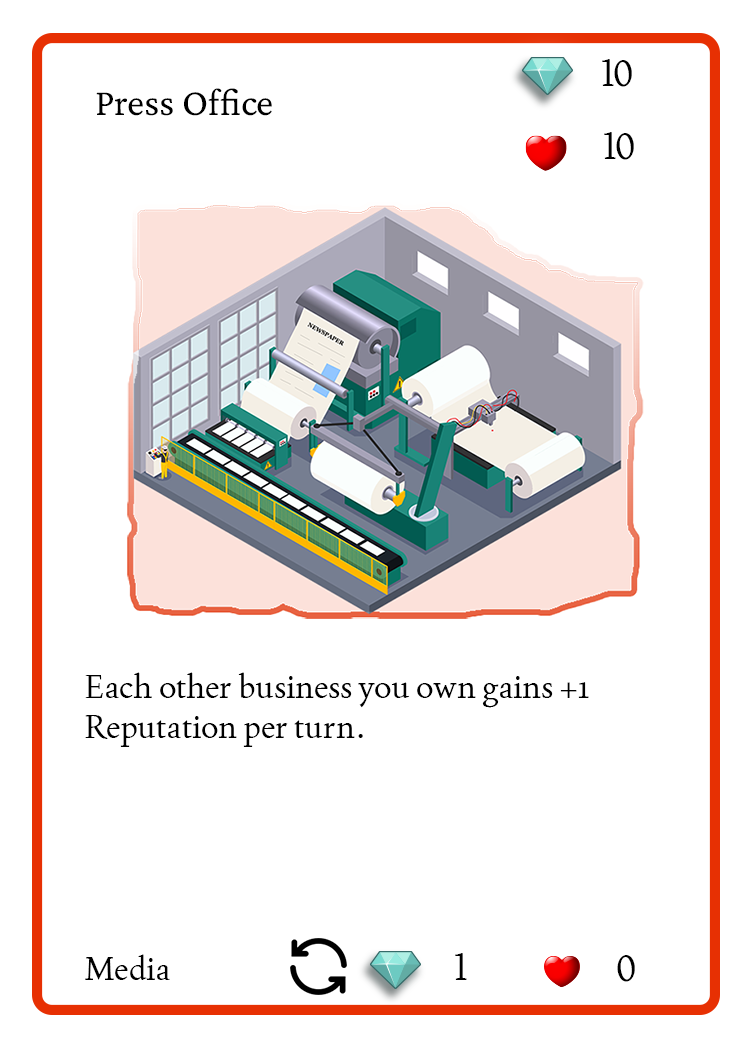
<style>
.page{position:relative;width:750px;height:1050px;background:#ffffff}
.page>*{position:absolute;margin:0}
.t1{font:37.5px "Joan-Regular";color:#000000;text-transform:uppercase}
.t2{font:38.9px "CrimsonPro-Regular";color:#000000}
.t3{font:33.3px "Joan-Regular";color:#000000}
</style>
<div class="page">
<p class="t1" style="left:602px;top:59px;width:30px;height:28px">10</p>
<p class="t2" style="left:96px;top:88px;width:176px;height:28px">Press Office</p>
<p class="t1" style="left:604px;top:132px;width:30px;height:28px">10</p>
<p class="t3" style="left:85px;top:672px;width:504px;height:75px">Each other business you own gains +1 Reputation per turn.</p>
<p class="t1" style="left:455px;top:953px;width:12px;height:27px">1</p>
<p class="t3" style="left:85px;top:954px;width:85px;height:26px">Media</p>
<p class="t1" style="left:617px;top:955px;width:18px;height:27px">0</p>
</div>
